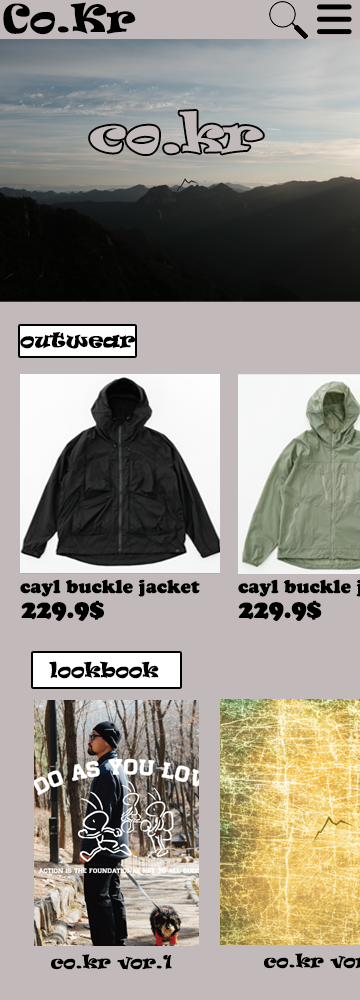
<style>
.page{position:relative;width:360px;height:1000px;background:#c2baba}
.page>*{position:absolute;margin:0}
.t1{font:36.6px "Ravie";color:#000000}
.t2{font:39.9px "Ravie";color:#c2baba}
.t3{font:20px "Ravie";color:#000000}
.t4{font:18px "Cooper-BlkBT";color:#000000}
.t5{font:24.3px "Cooper-BlkBT";color:#000000}
.t6{font:19px "Ravie";color:#000000}
.t7{font:17.2px "Ravie";color:#000000}
</style>
<div class="page">
<p class="t1" style="left:3px;top:2px;width:133px;height:33px">Co.Kr</p>
<p class="t2" style="left:90px;top:111px;width:173px;height:43px">co.kr</p>
<p class="t3" style="left:20px;top:332px;width:116px;height:17px">outwear</p>
<p class="t4" style="left:20px;top:579px;width:180px;height:18px">cayl buckle jacket</p>
<p class="t5" style="left:21px;top:600px;width:83px;height:21px">229.9$</p>
<p class="t5" style="left:238px;top:600px;width:84px;height:21px">229.9$</p>
<p class="t6" style="left:49px;top:661px;width:110px;height:18px">lookbook</p>
<p class="t7" style="left:51px;top:954px;width:121px;height:16px">co.kr vor.1</p>
</div>
